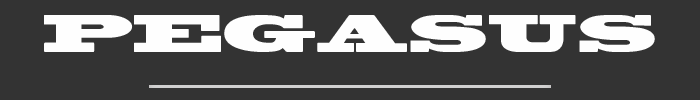
<style>
.page{position:relative;width:700px;height:100px;background:#333333}
.page>*{position:absolute;margin:0}
.t1{font:50px "BlackoakStd";color:#fefefe}
</style>
<div class="page">
<p class="t1" style="left:44px;top:15px;width:611px;height:37px">PEGASUS</p>
</div>
